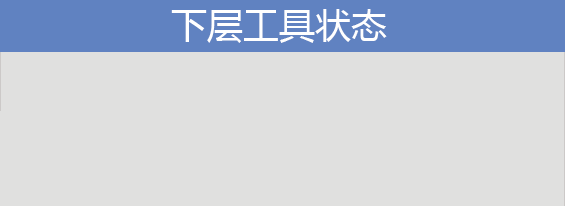
<style>
.page{position:relative;width:565px;height:206px;background:#e0e0df}
.page>*{position:absolute;margin:0}
.t1{font:36px "MicrosoftYaHei";color:#ffffff}
</style>
<div class="page">
<p class="t1" style="left:171px;top:9px;width:216px;height:34px">下层工具状态</p>
</div>
